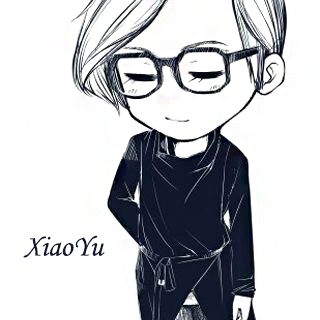
<style>
.page{position:relative;width:320px;height:320px;background:#ffffff}
.page>*{position:absolute;margin:0}
.t1{font:30px "STLiti";color:#11172a}
</style>
<div class="page">
<p class="t1" style="left:23px;top:235px;width:82px;height:23px">XiaoYu</p>
</div>
